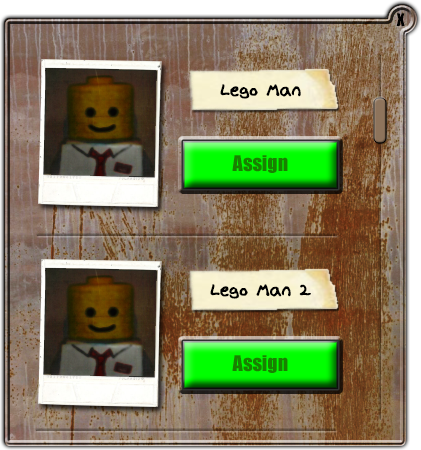
<style>
.page{position:relative;width:421px;height:450px}
.page>*{position:absolute;margin:0}
.t1{font:16px "Impact";color:#000000}
.t2{font:20px "Lupas";color:#000000}
.t3{font:20px "Impact";color:#188100}
</style>
<div class="page">
<p class="t1" style="left:396px;top:13px;width:9px;height:13px">X</p>
<p class="t2" style="left:220px;top:84px;width:81px;height:15px">Lego Man</p>
<p class="t3" style="left:232px;top:155px;width:56px;height:18px">Assign</p>
<p class="t2" style="left:210px;top:284px;width:101px;height:15px">Lego Man 2</p>
<p class="t3" style="left:232px;top:355px;width:56px;height:18px">Assign</p>
</div>
